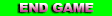
<style>
.page{position:relative;width:112px;height:16px;background:#00ff00}
.page>*{position:absolute;margin:0}
.t1{font:11.9px "Arial-Black";scale:1.05 1}
</style>
<div class="page">
<p class="t1" style="left:20px;top:3px;width:74px;height:9px">END GAME</p>
</div>
